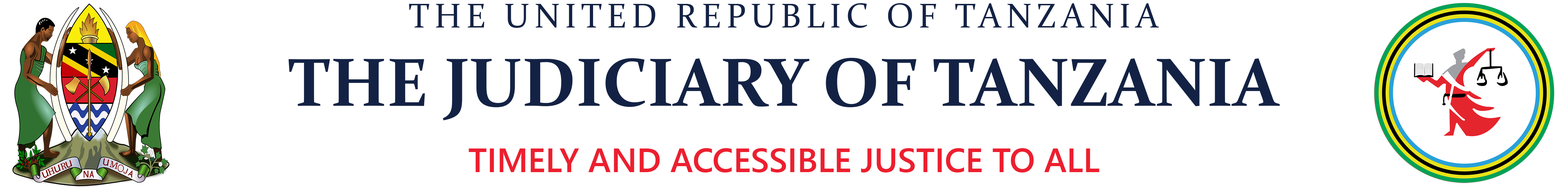
<style>
.page{position:relative;width:1568px;height:188px;background:#ffffff}
.page>*{position:absolute;margin:0}
.t1{font:33.7px "Constantia";letter-spacing:0.15em;color:#132244}
.t2{font:68.4px "Constantia-Bold";color:#132244}
.t3{font:33.7px "SegoeUI-Semibold";color:#ec1f2f}
</style>
<div class="page">
<p class="t1" style="left:409px;top:3px;width:750px;height:25px">THE UNITED REPUBLIC OF TANZANIA</p>
<p class="t2" style="left:288px;top:58px;width:992px;height:62px">THE JUDICIARY OF TANZANIA</p>
<p class="t3" style="left:469px;top:148px;width:630px;height:24px">TIMELY AND ACCESSIBLE JUSTICE TO ALL</p>
</div>
